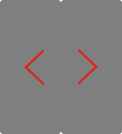
<style>
.page{position:relative;width:122px;height:134px;background:#7f7f7f}
.page>*{position:absolute;margin:0}
.t1{font:49.4px "FZYXJW--GB1-0";color:#da251c}
</style>
<div class="page">
<p class="t1" style="left:24px;top:49px;width:21px;height:36px;rotate:180deg">&gt;</p>
<p class="t1" style="left:77px;top:49px;width:21px;height:36px">&gt;</p>
</div>
